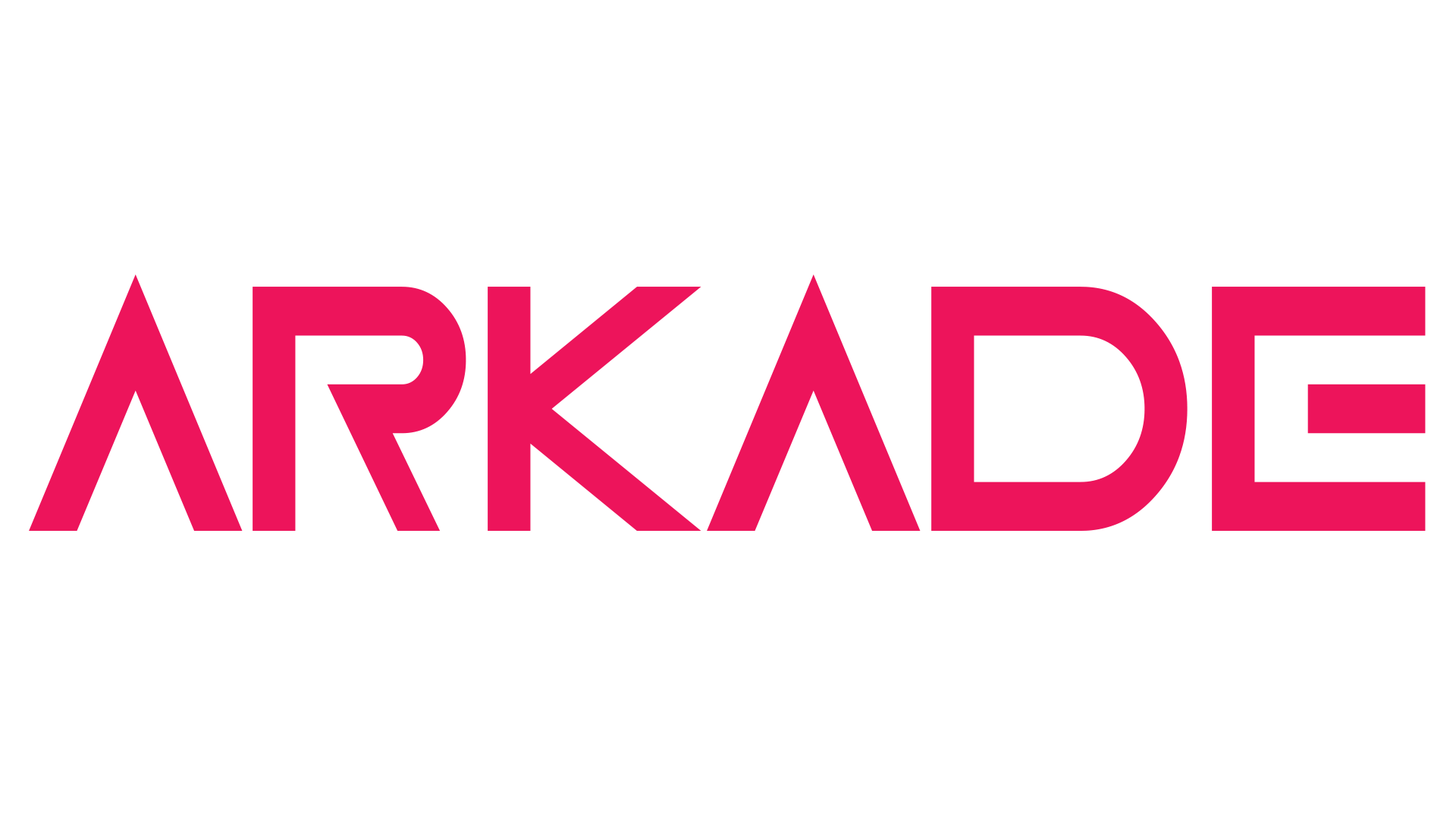
<style>
.page{position:relative;width:1456px;height:819px;background:#ffffff}
.page>*{position:absolute;margin:0}
.t1{font:390.5px "GameOfSquids";color:#ed145b;scale:0.87 1}
</style>
<div class="page">
<p class="t1" style="left:29px;top:275px;width:1397px;height:256px">ARKADE</p>
</div>
